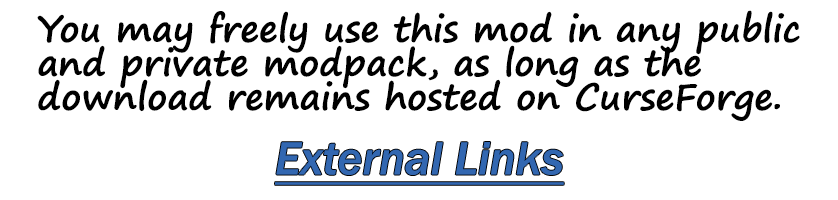
<style>
.page{position:relative;width:838px;height:200px;background:#ffffff}
.page>*{position:absolute;margin:0}
.t1{font:36px/34px "SegoePrint-Bold";color:#000000}
.t2{font:48px "FranklinGothic-MediumItalic";color:#3267b1;text-decoration:underline}
</style>
<div class="page">
<p class="t1" style="left:37px;top:10px;width:763px;height:111px">You may freely use this mod in any public<br>and private modpack, as long as the <br>download remains hosted on CurseForge.</p>
<p class="t2" style="left:275px;top:142px;width:289px;height:43px">External Links</p>
</div>
